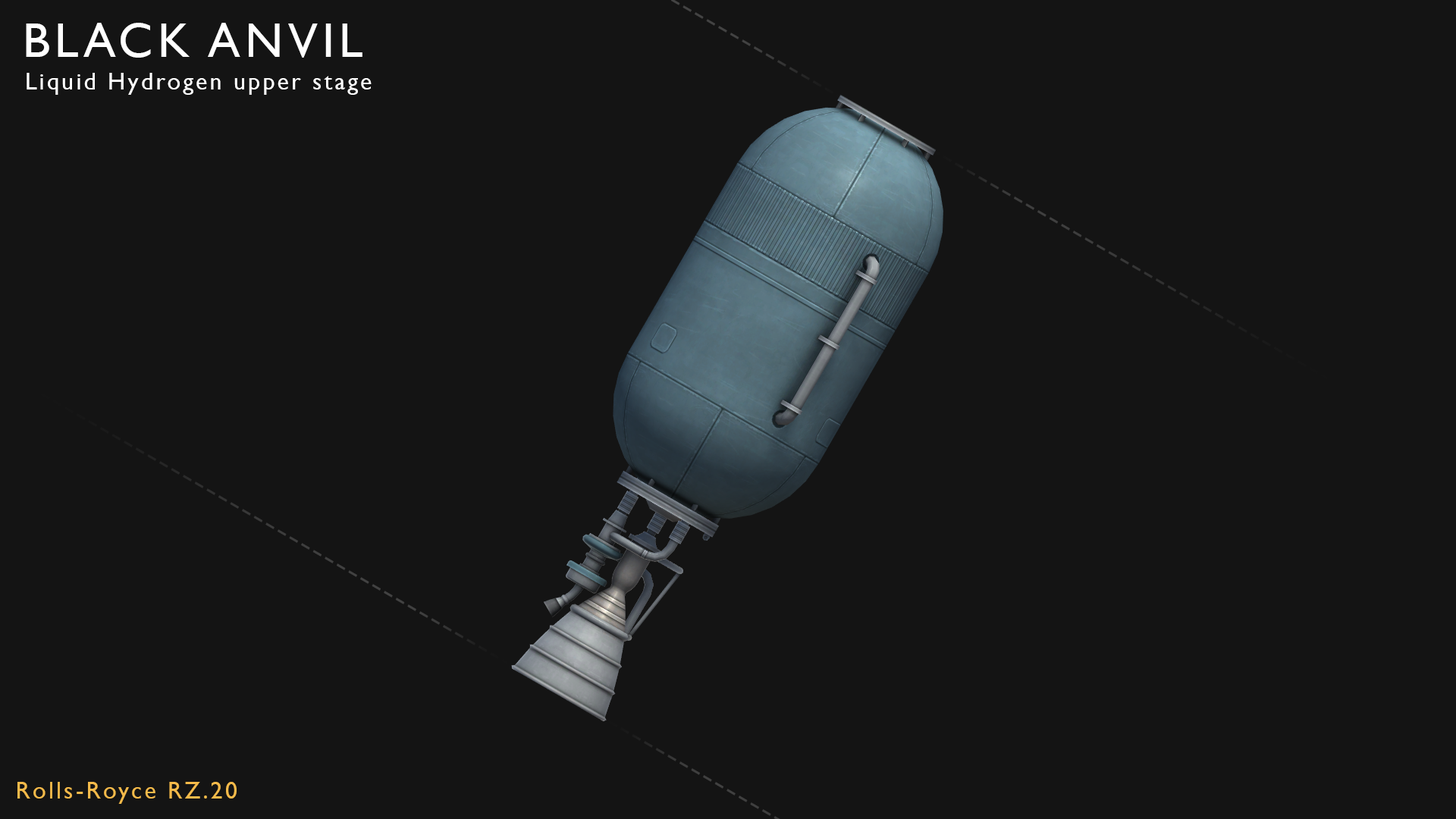
<style>
.page{position:relative;width:1456px;height:819px;background:#141414}
.page>*{position:absolute;margin:0}
.t1{font:48.5px "GillSansMT";letter-spacing:0.1em;color:#ffffff}
.t2{font:24.3px "GillSansMT";letter-spacing:0.1em;color:#ffffff}
.t3{font:24.3px "GillSansMT";letter-spacing:0.1em;color:#f4ba4a}
</style>
<div class="page">
<p class="t1" style="left:26px;top:23px;width:336px;height:35px">BLACK ANVIL</p>
<p class="t2" style="left:27px;top:73px;width:345px;height:22px">Liquid Hydrogen upper stage</p>
<p class="t3" style="left:17px;top:782px;width:220px;height:22px">Rolls-Royce RZ.20</p>
</div>
